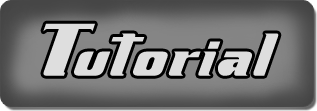
<style>
.page{position:relative;width:317px;height:111px}
.page>*{position:absolute;margin:0}
.t1{font:57.1px "-Xenogears";letter-spacing:0.05em;color:#dedede}
</style>
<div class="page">
<p class="t1" style="left:43px;top:23px;width:236px;height:53px">Tutorial</p>
</div>
